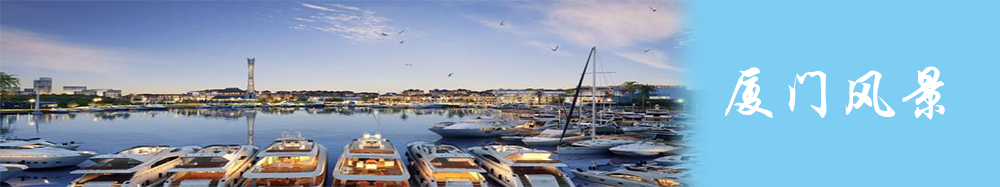
<style>
.page{position:relative;width:1000px;height:187px;background:#7ecef4}
.page>*{position:absolute;margin:0}
.t1{font:60px "STXingkai";color:#ffffff}
</style>
<div class="page">
<p class="t1" style="left:725px;top:66px;width:220px;height:54px">厦门风景</p>
</div>
